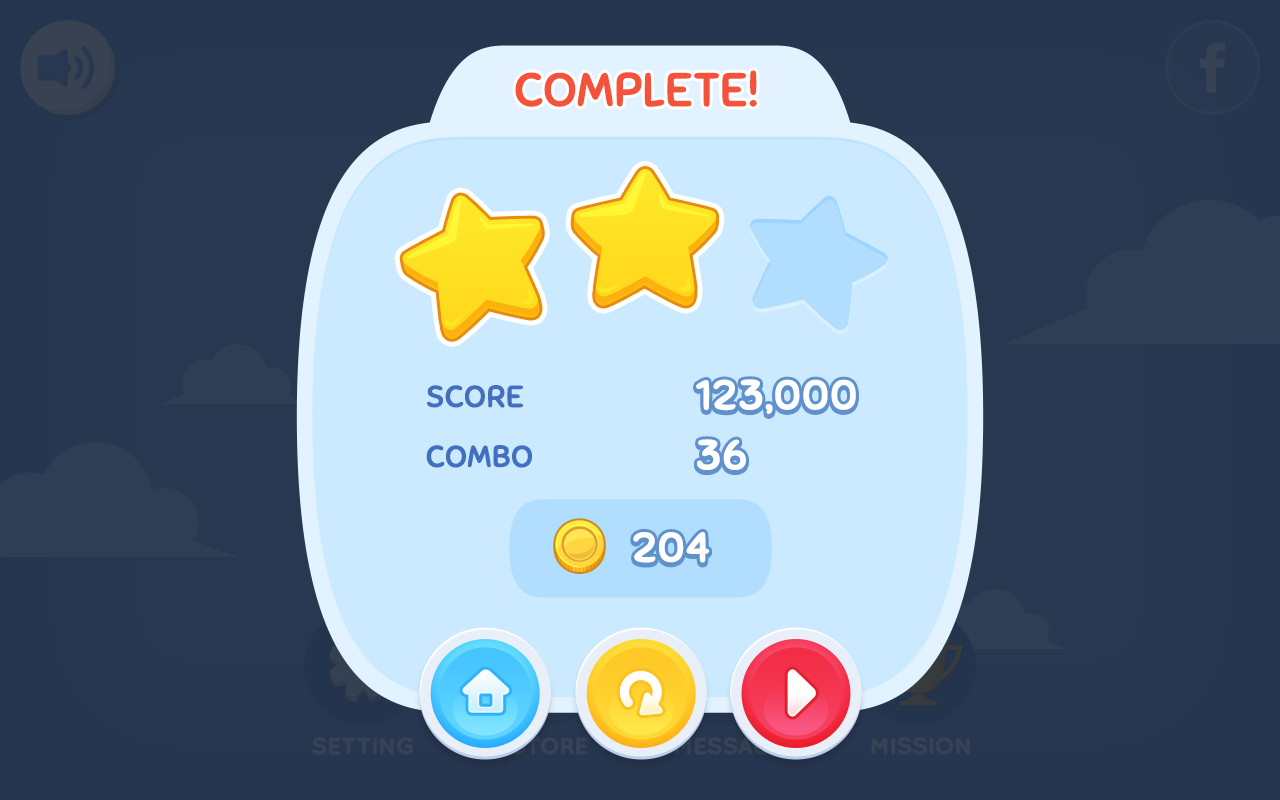
<style>
.page{position:relative;width:1280px;height:800px;background:#cceaff}
.page>*{position:absolute;margin:0}
.t1{font:45.6px "Sniglet-Regular";letter-spacing:-0.025em;color:#f5523c;text-transform:uppercase;font-weight:bold;scale:1.06 1}
.t2{font:29.6px/60px "Sniglet-Regular";letter-spacing:-0.025em;color:#4270be;text-transform:uppercase;font-weight:bold;scale:1.06 1}
.t3{font:41px "Sniglet-Regular";letter-spacing:-0.01em;color:#ffffff;text-transform:uppercase;font-weight:bold;scale:1.06 1}
</style>
<div class="page">
<p class="t1" style="left:515px;top:70px;width:242px;height:37px">complete!</p>
<p class="t2" style="left:426px;top:385px;width:106px;height:83px">score<br>Combo</p>
<p class="t3" style="left:696px;top:381px;width:160px;height:35px">123,000</p>
<p class="t3" style="left:696px;top:379px;width:160px;height:35px">123,000</p>
<p class="t3" style="left:697px;top:441px;width:49px;height:31px">36</p>
<p class="t3" style="left:697px;top:439px;width:49px;height:31px">36</p>
<p class="t3" style="left:633px;top:534px;width:77px;height:31px">204</p>
<p class="t3" style="left:633px;top:532px;width:77px;height:31px">204</p>
</div>
